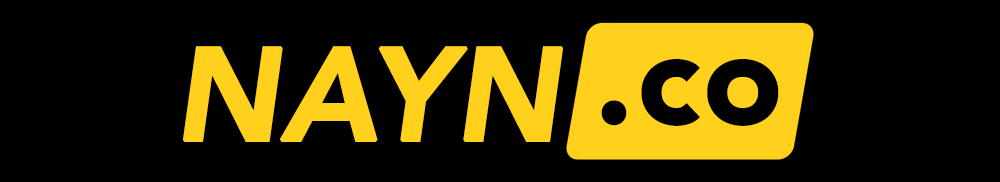
<style>
.page{position:relative;width:1000px;height:182px;background:#000000}
.page>*{position:absolute;margin:0}
.t1{font:130px "Avenir-HeavyOblique";color:#ffd11d;font-weight:bold}
.t2{font:130px "Avenir-Black";color:#000000;font-weight:bold}
</style>
<div class="page">
<p class="t1" style="left:183px;top:46px;width:380px;height:96px">NAYN</p>
<p class="t2" style="left:601px;top:59px;width:178px;height:67px">.co</p>
</div>
